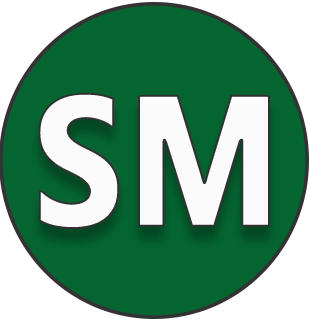
<style>
.page{position:relative;width:309px;height:320px;background:#046531}
.page>*{position:absolute;margin:0}
.t1{font:183.3px "MicrosoftPhagsPa-Bold";color:#ffffff;font-weight:bold;scale:0.88 1}
</style>
<div class="page">
<p class="t1" style="left:38px;top:92px;width:232px;height:137px;opacity:0.97">SM</p>
</div>
